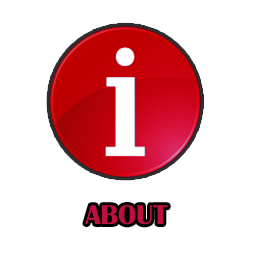
<style>
.page{position:relative;width:256px;height:256px;background:#ffffff}
.page>*{position:absolute;margin:0}
.t1{font:28px "BritannicBold";color:#bd103d}
</style>
<div class="page">
<p class="t1" style="left:85px;top:205px;width:83px;height:20px">ABOUT</p>
</div>
